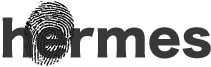
<style>
.page{position:relative;width:211px;height:67px;background:#ffffff}
.page>*{position:absolute;margin:0}
.t1{font:48px "HiraKakuStd-W8";color:#383838}
</style>
<div class="page">
<p class="t1" style="left:2px;top:17px;width:209px;height:42px">hermes</p>
</div>
